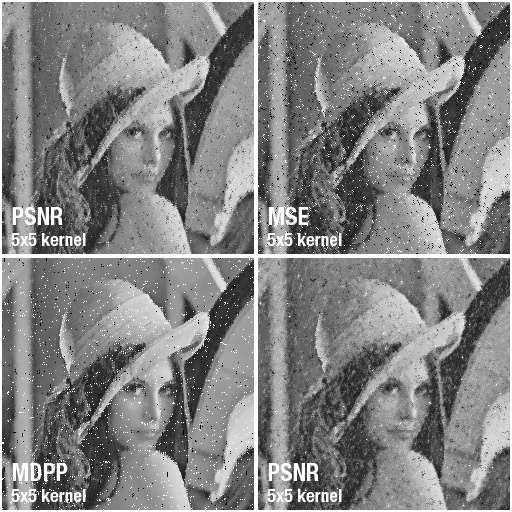
<style>
.page{position:relative;width:512px;height:512px}
.page>*{position:absolute;margin:0}
.t1{font:18px "HelveticaNeueLTPro-BdCn";color:#ffffff}
.t2{font:24px "HelveticaNeueLTPro-BdCn";color:#ffffff}
</style>
<div class="page">
<p class="t1" style="left:11px;top:207px;width:75px;height:39px;text-align:justify"><span class="t2">PSNR<br></span>5x5 kernel</p>
<p class="t1" style="left:267px;top:207px;width:75px;height:39px;text-align:justify"><span class="t2">MSE<br></span>5x5 kernel</p>
<p class="t1" style="left:11px;top:463px;width:75px;height:39px;text-align:justify"><span class="t2">MDPP<br></span>5x5 kernel</p>
<p class="t1" style="left:267px;top:463px;width:75px;height:39px;text-align:justify"><span class="t2">PSNR<br></span>5x5 kernel</p>
</div>
